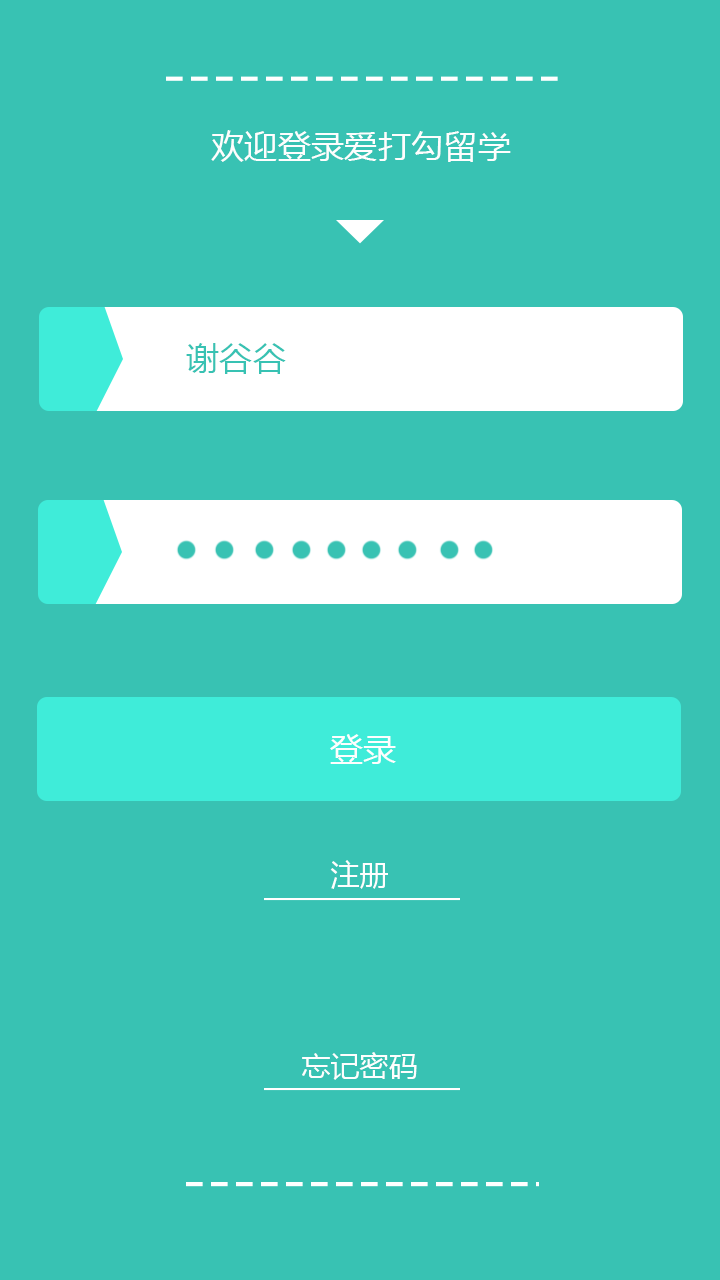
<style>
.page{position:relative;width:720px;height:1280px;background:#38c2b3}
.page>*{position:absolute;margin:0}
.t1{font:33.3px "MicrosoftYaHei";color:#fefefe}
.t2{font:33.3px "MicrosoftYaHei";color:#38c2b3}
.t3{font:29.2px "MicrosoftYaHei";color:#fefefe}
</style>
<div class="page">
<p class="t1" style="left:211px;top:130px;width:300px;height:32px">欢迎登录爱打勾留学</p>
<p class="t2" style="left:186px;top:343px;width:100px;height:31px">谢谷谷</p>
<p class="t1" style="left:330px;top:734px;width:66px;height:30px">登录</p>
<p class="t3" style="left:330px;top:860px;width:58px;height:29px">注册</p>
<p class="t3" style="left:302px;top:1052px;width:115px;height:28px">忘记密码</p>
</div>
